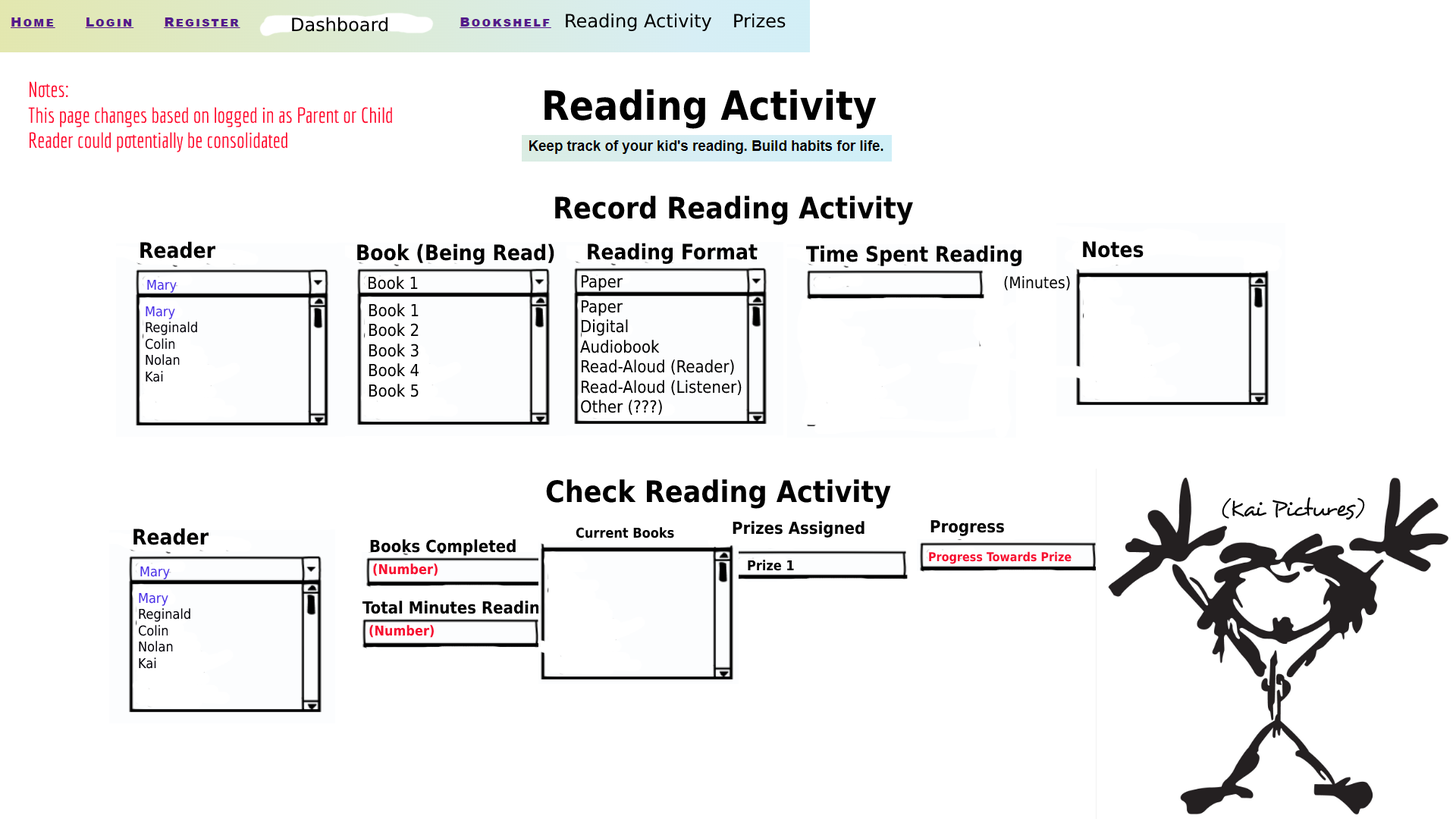
<style>
.page{position:relative;width:1456px;height:819px;background:#ffffff}
.page>*{position:absolute;margin:0}
.t1{font:21.2px "Economica-Regular";color:#ff0a2c}
.t2{font:40.2px "DejaVuSansCondensed-Bold";color:#000000}
.t3{font:29.6px "DejaVuSansCondensed-Bold";color:#000000}
.t4{font:21.2px "DejaVuSansCondensed-Bold";color:#000000}
.t5{font:13.6px "DejaVuSansCondensed";color:#4b31e7}
.t6{font:16.7px "DejaVuSansCondensed";color:#000000}
.t7{font:15.9px "DejaVuSansCondensed";color:#000000}
.t8{font:13.6px "DejaVuSansCondensed";color:#020108}
.t9{font:24.3px "Desyrel";color:#000000}
.t10{font:16.7px "DejaVuSansCondensed-Bold";color:#000000}
.t11{font:13.6px "DejaVuSansCondensed-Bold";color:#000000}
.t12{font:12.1px "DejaVuSansCondensed-Bold";color:#f71030}
.t13{font:13.6px "DejaVuSansCondensed-Bold";color:#f71030}
</style>
<div class="page">
<p class="t1" style="left:28px;top:81px;width:364px;height:71px">Notes: <br>This page changes based on logged in as Parent or Child<br>Reader could potentially be consolidated</p>
<p class="t2" style="left:544px;top:89px;width:333px;height:40px">Reading Activity</p>
<p class="t3" style="left:555px;top:196px;width:358px;height:29px">Record Reading Activity</p>
<p class="t4" style="left:140px;top:241px;width:75px;height:18px">Reader</p>
<p class="t4" style="left:357px;top:243px;width:197px;height:22px">Book (Being Read)</p>
<p class="t4" style="left:588px;top:243px;width:170px;height:22px">Reading Format</p>
<p class="t4" style="left:806px;top:245px;width:215px;height:22px">Time Spent Reading</p>
<p class="t4" style="left:1083px;top:241px;width:61px;height:17px">Notes</p>
<p class="t5" style="left:147px;top:279px;width:30px;height:14px">Mary</p>
<p class="t6" style="left:368px;top:276px;width:50px;height:14px">Book 1</p>
<p class="t6" style="left:581px;top:275px;width:42px;height:16px">Paper</p>
<p class="t7" style="left:1004px;top:276px;width:66px;height:14px">(Minutes)</p>
<p class="t5" style="left:146px;top:306px;width:29px;height:13px">Mary</p>
<p class="t6" style="left:369px;top:303px;width:50px;height:94px">Book 1<br>Book 2<br>Book 3<br>Book 4<br>Book 5</p>
<p class="t6" style="left:580px;top:300px;width:162px;height:115px">Paper<br>Digital<br>Audiobook<br>Read-Aloud (Reader)<br>Read-Aloud (Listener)<br>Other (???)</p>
<p class="t8" style="left:145px;top:322px;width:52px;height:60px">Reginald<br>Colin<br>Nolan<br>Kai</p>
<p class="t3" style="left:546px;top:479px;width:345px;height:30px">Check Reading Activity</p>
<p class="t9" style="left:1222px;top:497px;width:143px;height:23px">(Kai Pictures)</p>
<p class="t10" style="left:733px;top:521px;width:131px;height:17px">Prizes Assigned</p>
<p class="t10" style="left:930px;top:519px;width:74px;height:17px">Progress</p>
<p class="t11" style="left:576px;top:527px;width:98px;height:11px">Current Books</p>
<p class="t10" style="left:370px;top:539px;width:146px;height:17px">Books Completed</p>
<p class="t12" style="left:929px;top:551px;width:143px;height:13px">Progress Towards Prize</p>
<p class="t13" style="left:373px;top:563px;width:65px;height:13px">(Number)</p>
<p class="t11" style="left:748px;top:560px;width:46px;height:11px">Prize 1</p>
<p class="t10" style="left:362px;top:601px;width:188px;height:16px">Total Minutes Reading</p>
</div>
